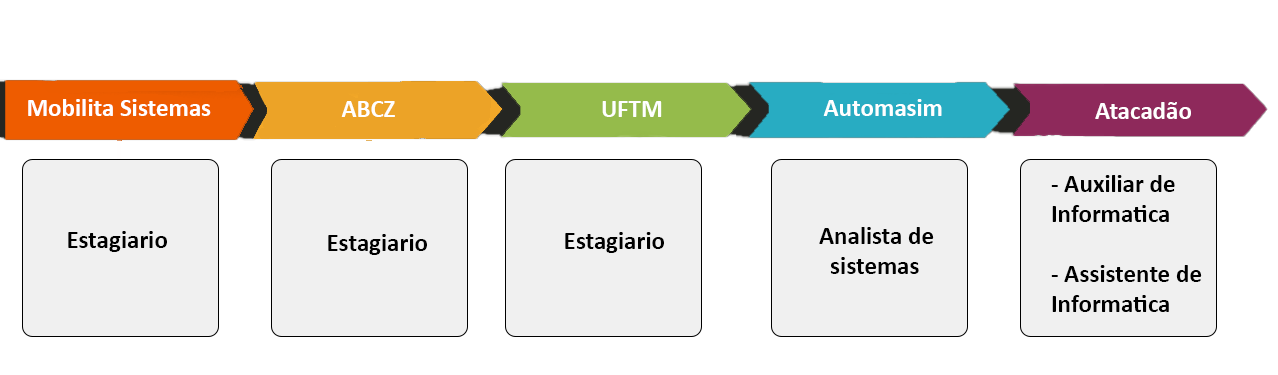
<style>
.page{position:relative;width:1278px;height:375px;background:#ffffff}
.page>*{position:absolute;margin:0}
.t1{font:25px "Calibri-Bold";color:#ffffff}
.t2{font:25px "Calibri-Bold";color:#000000}
</style>
<div class="page">
<p class="t1" style="left:28px;top:99px;width:183px;height:17px">Mobilita Sistemas</p>
<p class="t1" style="left:341px;top:101px;width:54px;height:16px">ABCZ</p>
<p class="t1" style="left:602px;top:101px;width:60px;height:16px">UFTM</p>
<p class="t1" style="left:823px;top:99px;width:119px;height:17px">Automasim</p>
<p class="t1" style="left:1095px;top:102px;width:96px;height:17px">Atacadão</p>
<p class="t2" style="left:1051px;top:175px;width:151px;height:137px">- Auxiliar de<br>Informatica<br><br>- Assistente de<br>Informatica</p>
<p class="t2" style="left:68px;top:231px;width:99px;height:21px">Estagiario</p>
<p class="t2" style="left:565px;top:232px;width:99px;height:21px">Estagiario</p>
<p class="t2" style="left:819px;top:227px;width:115px;height:47px">Analista de <br>  sistemas</p>
<p class="t2" style="left:328px;top:234px;width:99px;height:21px">Estagiario</p>
</div>
